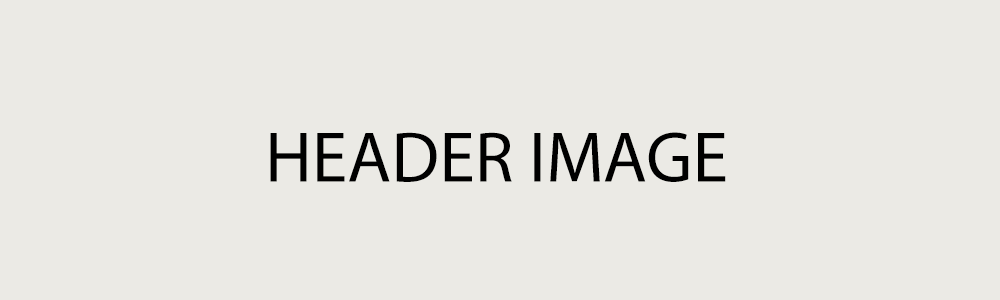
<style>
.page{position:relative;width:1000px;height:300px;background:#ebeae5}
.page>*{position:absolute;margin:0}
.t1{font:72px "MyriadPro-Regular";color:#000000}
</style>
<div class="page">
<p class="t1" style="left:270px;top:132px;width:456px;height:50px">HEADER IMAGE</p>
</div>
